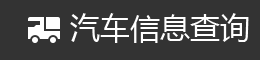
<style>
.page{position:relative;width:260px;height:60px;background:#333333}
.page>*{position:absolute;margin:0}
.t1{font:30px "MicrosoftYaHei";color:#ffffff}
</style>
<div class="page">
<p class="t1" style="left:70px;top:13px;width:179px;height:30px">汽车信息查询</p>
</div>
